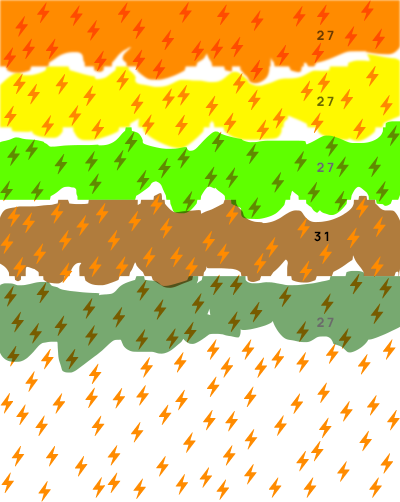
<style>
.page{position:relative;width:400px;height:502px;background:#ffffff}
.page>*{position:absolute;margin:0}
.t1{font:13px "Manrope-ExtraBold";letter-spacing:0.2em;color:#6b3a00;text-transform:uppercase}
.t2{font:13px "Manrope-ExtraBold";letter-spacing:0.2em;color:#6b6800;text-transform:uppercase}
.t3{font:13px "Manrope-ExtraBold";letter-spacing:0.2em;color:#6b6b6b;text-transform:uppercase}
.t4{font:13px "Manrope-ExtraBold";letter-spacing:0.2em;color:#000000;text-transform:uppercase}
</style>
<div class="page">
<p class="t1" style="left:317px;top:30px;width:17px;height:10px">27</p>
<p class="t2" style="left:317px;top:96px;width:17px;height:10px">27</p>
<p class="t3" style="left:317px;top:162px;width:17px;height:10px">27</p>
<p class="t4" style="left:314px;top:231px;width:15px;height:11px">31</p>
<p class="t3" style="left:317px;top:317px;width:17px;height:10px">27</p>
</div>
